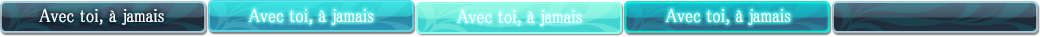
<style>
.page{position:relative;width:1040px;height:37px}
.page>*{position:absolute;margin:0}
.t1{font:19px "MS-PMincho";color:#ffffff;font-weight:bold;scale:0.84 1}
</style>
<div class="page">
<p class="t1" style="left:39px;top:8px;width:125px;height:17px">Avec toi, à jamais</p>
<p class="t1" style="left:248px;top:8px;width:126px;height:17px">Avec toi, à jamais</p>
<p class="t1" style="left:457px;top:9px;width:125px;height:17px">Avec toi, à jamais</p>
<p class="t1" style="left:665px;top:8px;width:126px;height:17px">Avec toi, à jamais</p>
</div>
